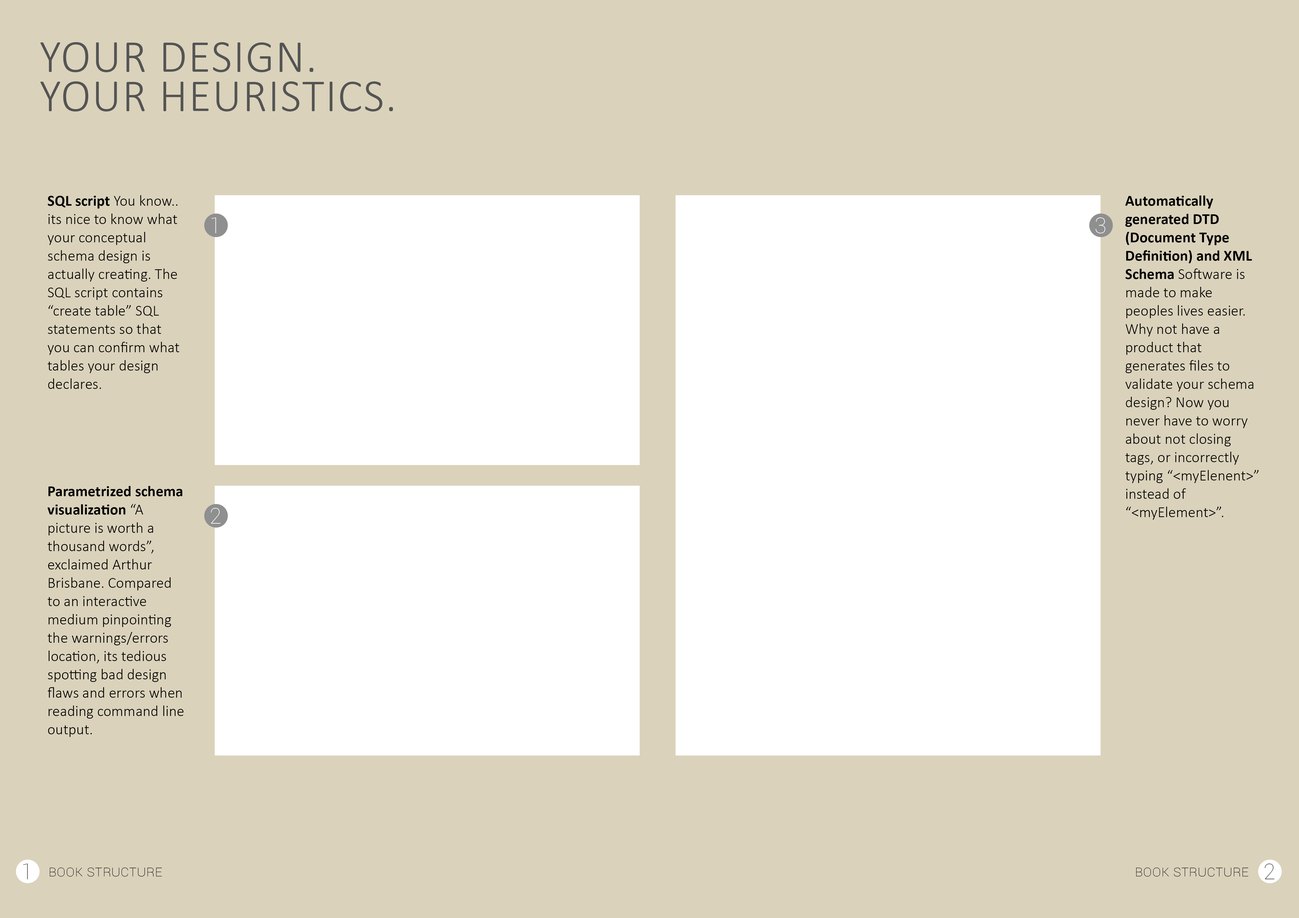
<style>
.page{position:relative;width:1299px;height:918px;background:#dad2bb}
.page>*{position:absolute;margin:0}
.t1{font:45.8px/39.3px "Calibri-Light";letter-spacing:0.025em;color:#545454;text-transform:uppercase}
.t2{font:15.3px "Calibri-Light";color:#000000}
.t3{font:15.3px "Calibri-Bold";color:#000000}
.t4{font:21.8px "Roboto-Thin";color:#ffffff}
.t5{font:21.8px "Roboto-Thin";color:#484848}
.t6{font:15.3px "Roboto-Thin";color:#000000;font-variant:small-caps}
</style>
<div class="page">
<p class="t1" style="left:40px;top:42px;width:353px;height:70px">your design.<br>your heuristics.</p>
<p class="t2" style="left:48px;top:195px;width:131px;height:194px"><span class="t3">SQL script </span>You know.. its nice to know what your conceptual schema design is actually creating. The SQL script contains “create table” SQL statements so that you can confirm what tables your design declares.</p>
<p class="t2" style="left:1125px;top:196px;width:133px;height:324px"><span class="t3">Automatically generated DTD (Document Type Definition) and XML Schema </span>Software is made to make peoples lives easier. Why not have a product that generates files to validate your schema design? Now you never have to worry about not closing tags, or incorrectly typing “&lt;myElenent&gt;” instead of “&lt;myElement&gt;”.</p>
<p class="t4" style="left:211px;top:218px;width:5px;height:15px">1</p>
<p class="t4" style="left:1095px;top:217px;width:10px;height:16px">3</p>
<p class="t2" style="left:47px;top:486px;width:136px;height:251px"><span class="t3">Parametrized schema visualization </span>“A picture is worth a thousand words”, exclaimed Arthur Brisbane. Compared to an interactive medium pinpointing the warnings/errors location, its tedious spotting bad design flaws and errors when reading command line output.</p>
<p class="t4" style="left:211px;top:508px;width:9px;height:16px">2</p>
<p class="t5" style="left:23px;top:864px;width:5px;height:16px">1</p>
<p class="t6" style="left:50px;top:868px;width:112px;height:9px">Book structure</p>
<p class="t6" style="left:1136px;top:868px;width:112px;height:9px">Book structure</p>
<p class="t5" style="left:1264px;top:864px;width:10px;height:16px">2</p>
</div>
